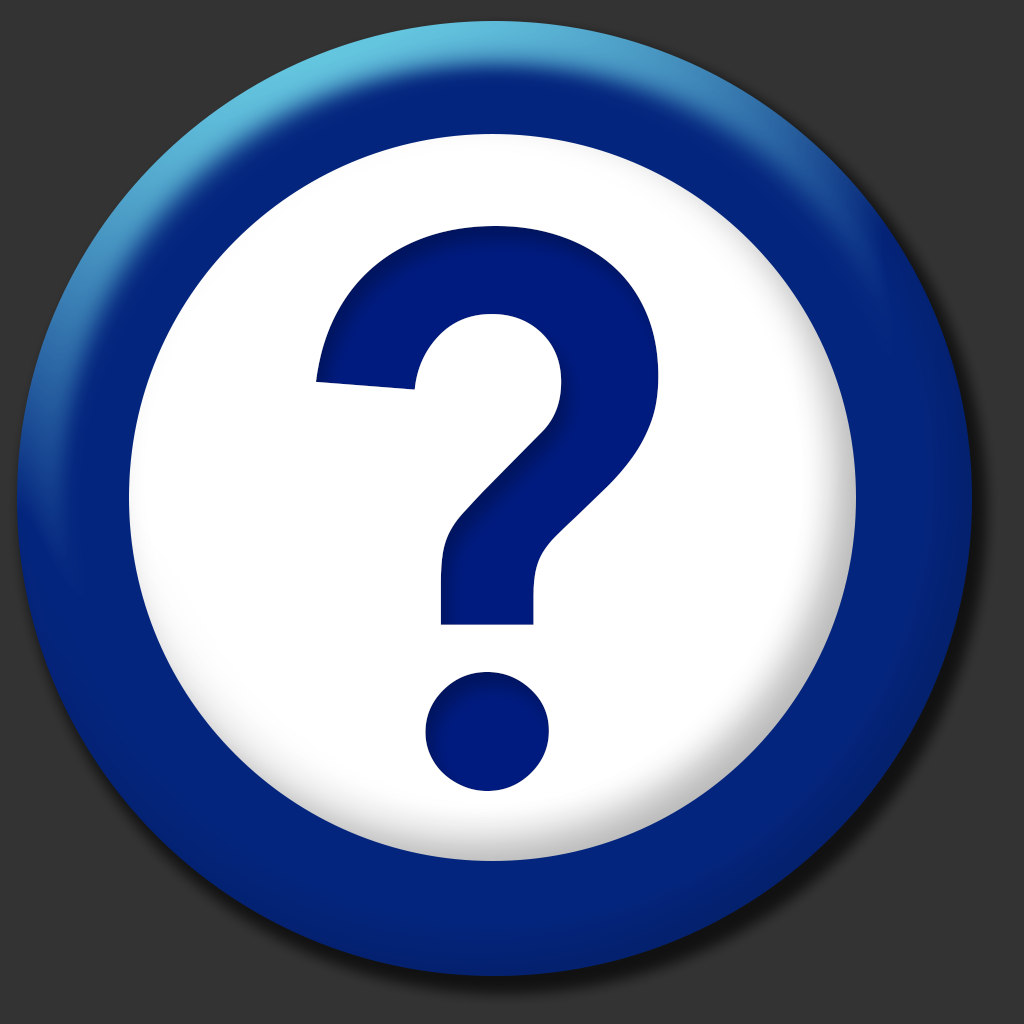
<style>
.page{position:relative;width:1024px;height:1024px;background:#333333}
.page>*{position:absolute;margin:0}
.t1{font:770.8px "Avenir-Heavy";letter-spacing:-0.025em;color:#001b7f}
</style>
<div class="page">
<p class="t1" style="left:315px;top:226px;width:344px;height:565px">?</p>
</div>
